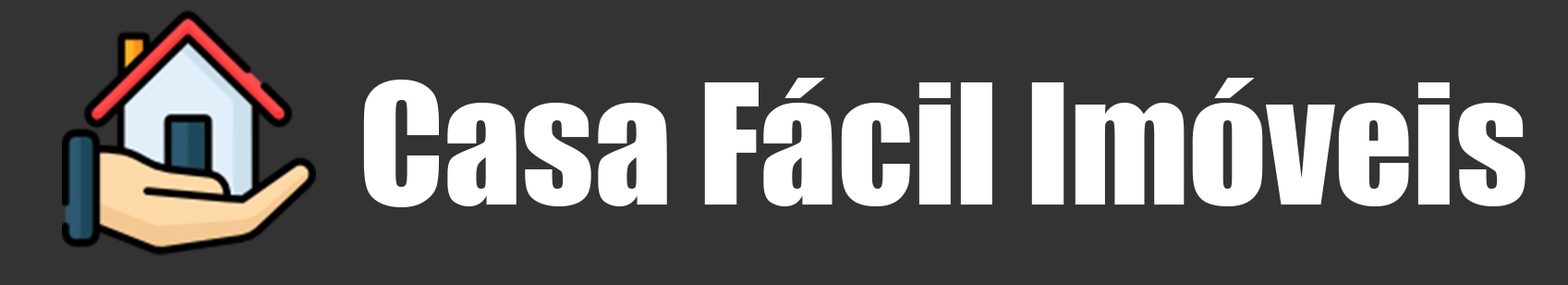
<style>
.page{position:relative;width:1568px;height:285px;background:#333333}
.page>*{position:absolute;margin:0}
.t1{font:154px "Impact";color:#ffffff}
</style>
<div class="page">
<p class="t1" style="left:363px;top:78px;width:1162px;height:129px">Casa Fácil Imóveis</p>
</div>
